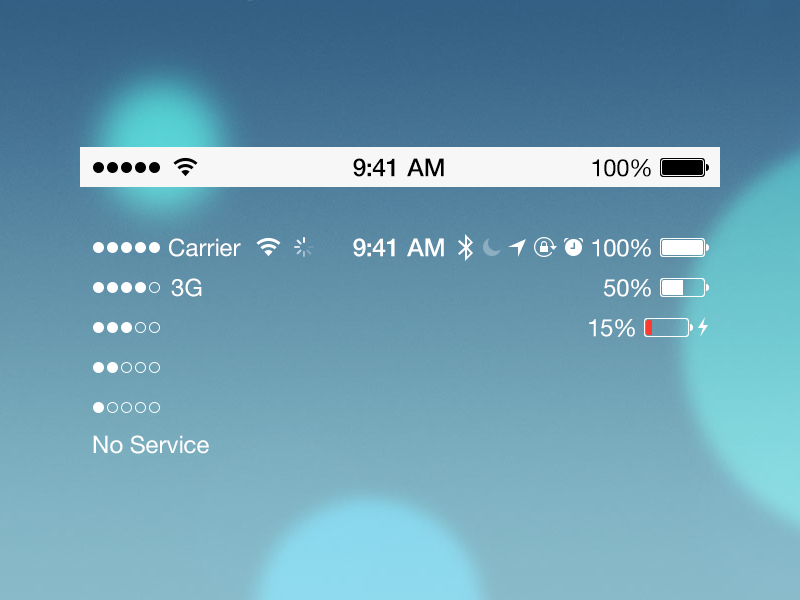
<style>
.page{position:relative;width:800px;height:600px}
.page>*{position:absolute;margin:0}
.t1{font:25px "HelveticaNeue-Medium";letter-spacing:-0.02em;color:#000000}
.t2{font:24px "HelveticaNeue";letter-spacing:-0.02em;color:#000000}
.t3{font:24px "HelveticaNeue";color:#ffffff}
.t4{font:25px "HelveticaNeue-Medium";letter-spacing:-0.02em;color:#ffffff}
.t5{font:24px "HelveticaNeue";letter-spacing:-0.02em;color:#ffffff}
</style>
<div class="page">
<p class="t1" style="left:353px;top:158px;width:91px;height:19px">9:41 AM</p>
<p class="t2" style="left:592px;top:159px;width:59px;height:18px">100%</p>
<p class="t3" style="left:169px;top:238px;width:72px;height:19px">Carrier</p>
<p class="t4" style="left:353px;top:238px;width:91px;height:19px">9:41 AM</p>
<p class="t5" style="left:592px;top:239px;width:59px;height:18px">100%</p>
<p class="t3" style="left:171px;top:278px;width:31px;height:19px">3G</p>
<p class="t5" style="left:604px;top:279px;width:47px;height:18px">50%</p>
<p class="t5" style="left:589px;top:319px;width:46px;height:18px">15%</p>
<p class="t3" style="left:93px;top:435px;width:116px;height:19px">No Service</p>
</div>
